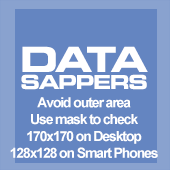
<style>
.page{position:relative;width:170px;height:170px;background:#6485c1}
.page>*{position:absolute;margin:0}
.t1{font:19.1px/17px "Square721BT-BoldExtended";letter-spacing:-0.06em;color:#ffffff;text-transform:uppercase}
.t2{font:34.7px "Square721BT-BoldExtended";letter-spacing:-0.08em;color:#ffffff;text-transform:uppercase}
.t3{font:14px "Arial-BoldMT";letter-spacing:-0.08em;color:#ffffff}
</style>
<div class="page">
<p class="t1" style="left:21px;top:46px;width:127px;height:44px;text-align:center"><span class="t2">Data<br></span>Sappers</p>
<p class="t3" style="left:10px;top:97px;width:148px;height:61px;text-align:center">Avoid outer area<br>Use mask to check<br>170x170 on Desktop<br>128x128 on Smart Phones</p>
</div>
